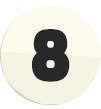
<style>
.page{position:relative;width:101px;height:109px;background:#fcfbeb}
.page>*{position:absolute;margin:0}
.t1{font:72px "MovaviGrotesqueBlack";color:#282828}
</style>
<div class="page">
<p class="t1" style="left:32px;top:29px;width:38px;height:53px">8</p>
</div>
